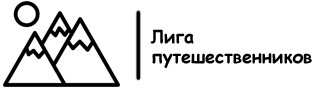
<style>
.page{position:relative;width:317px;height:88px;background:#ffffff}
.page>*{position:absolute;margin:0}
.t1{font:18px "ComicSansMS-Bold";color:#000000}
</style>
<div class="page">
<p class="t1" style="left:150px;top:29px;width:44px;height:15px">Лига</p>
<p class="t1" style="left:152px;top:53px;width:160px;height:15px">путешественников</p>
</div>
